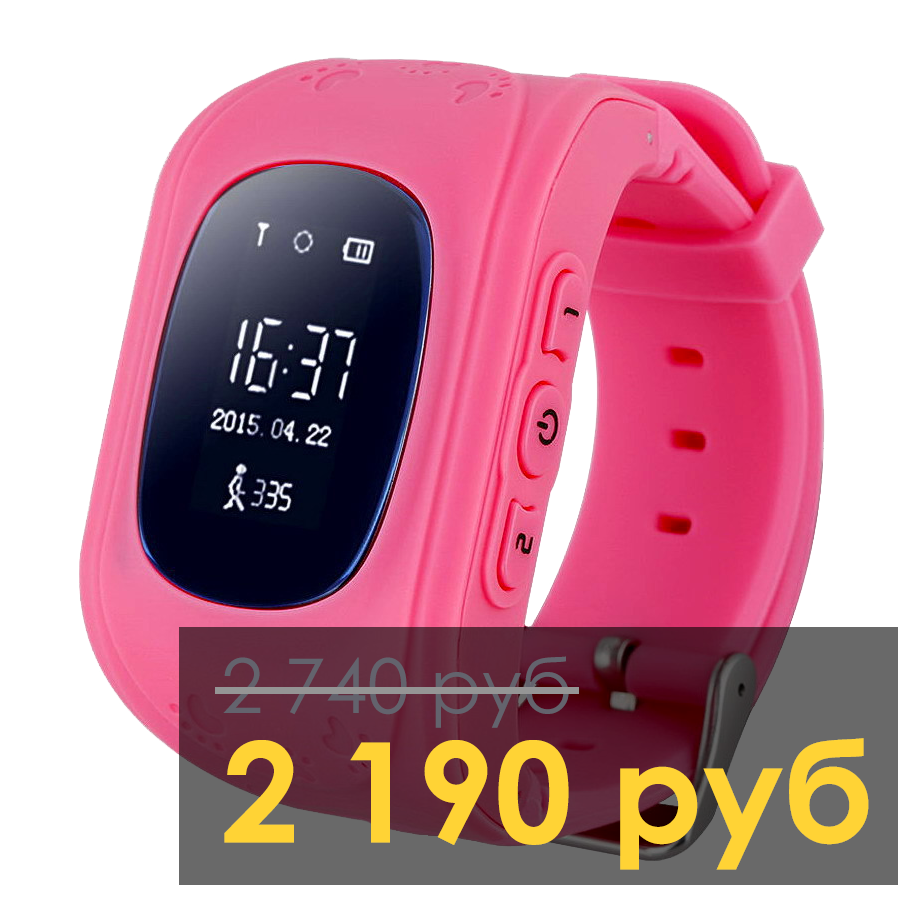
<style>
.page{position:relative;width:898px;height:900px;background:#ffffff}
.page>*{position:absolute;margin:0}
.t1{font:75.4px "CenturyGothic";color:#63636d}
.t2{font:139px "CenturyGothic-Bold";color:#ffd335}
</style>
<div class="page">
<p class="t1" style="left:223px;top:656px;width:346px;height:72px">2 740 руб</p>
<p class="t2" style="left:224px;top:738px;width:645px;height:132px">2 190 руб</p>
</div>
